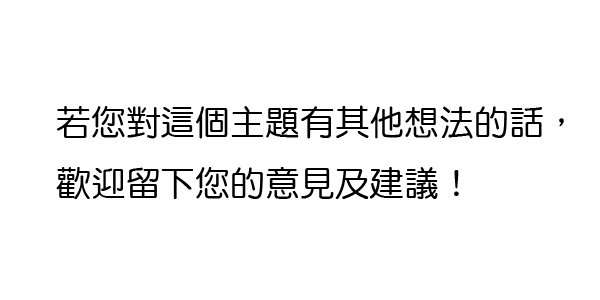
<style>
.page{position:relative;width:600px;height:300px;background:#ffffff}
.page>*{position:absolute;margin:0}
.t1{font:35px "DFYuan-W5-WIN-BF";color:#000000}
</style>
<div class="page">
<p class="t1" style="left:56px;top:105px;width:508px;height:94px">若您對這個主題有其他想法的話，<br>歡迎留下您的意見及建議！</p>
</div>
